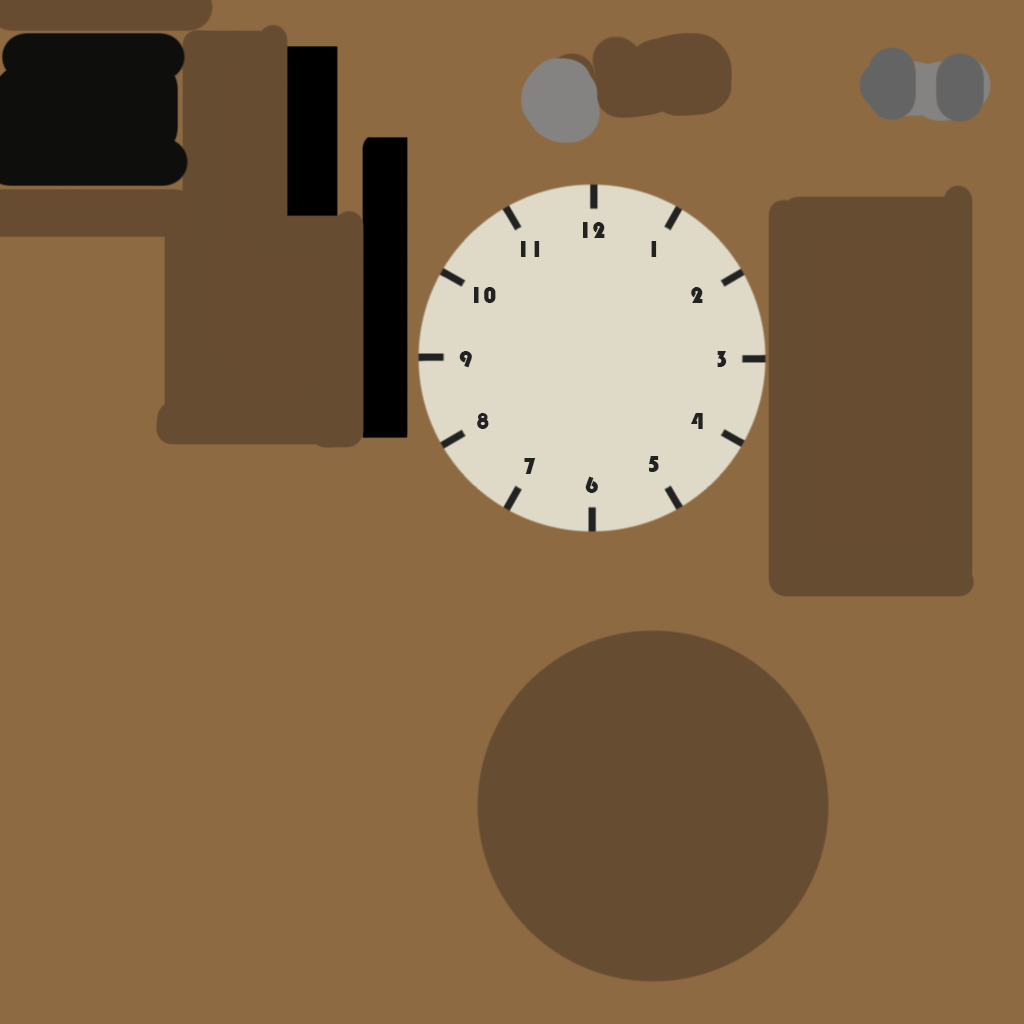
<style>
.page{position:relative;width:1024px;height:1024px;background:#8e6a43}
.page>*{position:absolute;margin:0}
.t1{font:24px "Bauhaus93";color:#222222}
</style>
<div class="page">
<p class="t1" style="left:583px;top:222px;width:22px;height:16px">12</p>
<p class="t1" style="left:521px;top:241px;width:19px;height:16px">11</p>
<p class="t1" style="left:651px;top:241px;width:6px;height:16px">1</p>
<p class="t1" style="left:474px;top:287px;width:22px;height:16px">10</p>
<p class="t1" style="left:691px;top:287px;width:12px;height:16px">2</p>
<p class="t1" style="left:459px;top:351px;width:13px;height:17px">9</p>
<p class="t1" style="left:717px;top:351px;width:10px;height:16px">3</p>
<p class="t1" style="left:477px;top:413px;width:12px;height:16px">8</p>
<p class="t1" style="left:691px;top:413px;width:12px;height:16px">4</p>
<p class="t1" style="left:524px;top:458px;width:12px;height:16px">7</p>
<p class="t1" style="left:649px;top:456px;width:10px;height:16px">5</p>
<p class="t1" style="left:585px;top:476px;width:13px;height:17px">6</p>
</div>
